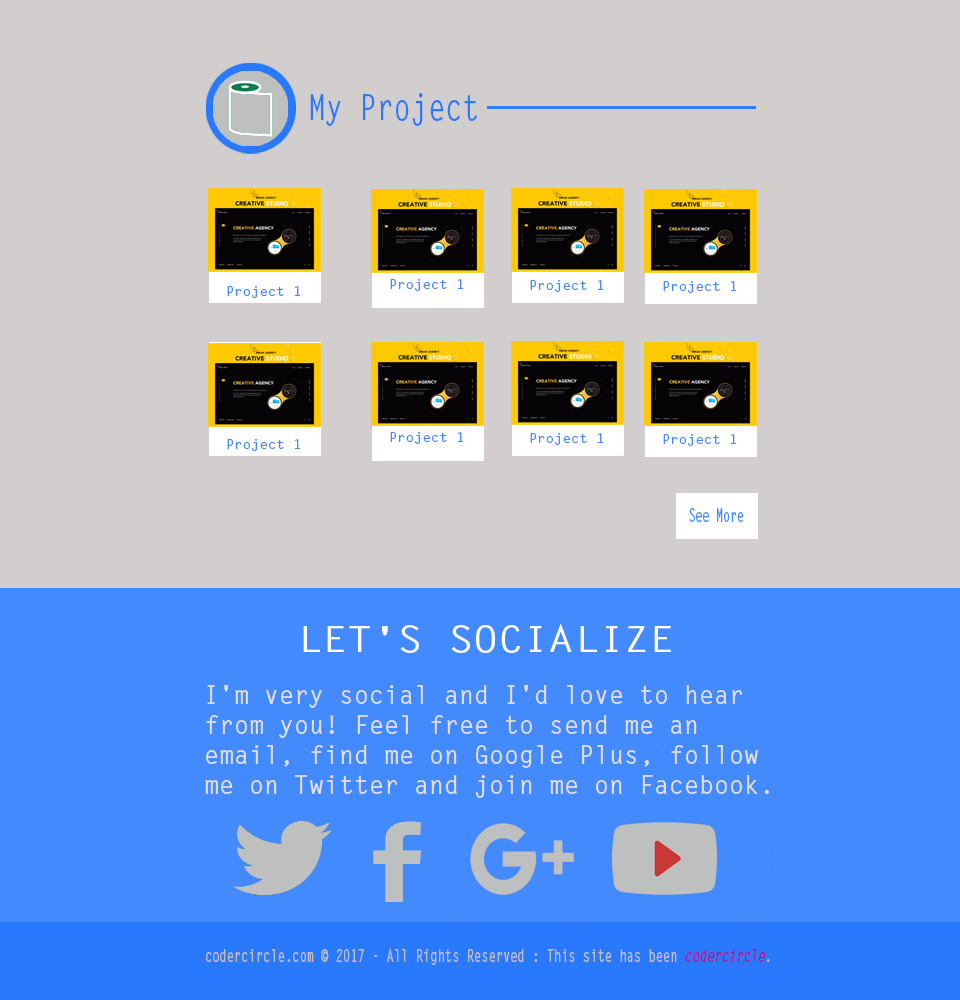
<style>
.page{position:relative;width:960px;height:1000px;background:#d1cecd}
.page>*{position:absolute;margin:0}
.t1{font:35.4px "LetterGothicStd-Bold";color:#2979ff;scale:0.8 1}
.t2{font:12.6px "LetterGothicStd-Bold";color:#448aff;scale:1.12 1}
.t3{font:18.5px "LetterGothicStd-Bold";color:#448aff;scale:0.63 1}
.t4{font:36.8px "LetterGothicStd-Bold";color:#ffffff;scale:1.14 1}
.t5{font:25px "LetterGothicStd-Bold";color:#e3dfdf}
.t6{font:17.8px "LetterGothicStd-Bold";color:#bebfbf;scale:0.68 1}
.t7{font:17.8px "LetterGothicStd-BoldSlanted";color:#c1058a;scale:0.68 1}
</style>
<div class="page">
<p class="t1" style="left:310px;top:93px;width:168px;height:33px">My Project</p>
<p class="t2" style="left:390px;top:279px;width:73px;height:12px">Project 1</p>
<p class="t2" style="left:530px;top:280px;width:73px;height:12px">Project 1</p>
<p class="t2" style="left:663px;top:281px;width:73px;height:12px">Project 1</p>
<p class="t2" style="left:227px;top:286px;width:73px;height:12px">Project 1</p>
<p class="t2" style="left:390px;top:432px;width:73px;height:12px">Project 1</p>
<p class="t2" style="left:530px;top:433px;width:73px;height:12px">Project 1</p>
<p class="t2" style="left:663px;top:434px;width:73px;height:12px">Project 1</p>
<p class="t2" style="left:227px;top:439px;width:73px;height:12px">Project 1</p>
<p class="t3" style="left:689px;top:508px;width:55px;height:14px">See More</p>
<p class="t4" style="left:303px;top:623px;width:368px;height:30px">LET'S SOCIALIZE</p>
<p class="t5" style="left:205px;top:685px;width:564px;height:113px">I'm very social and I'd love to hear <br>from you! Feel free to send me an <br>email, find me on Google Plus, follow<br>me on Twitter and join me on Facebook.</p>
<p class="t6" style="left:206px;top:948px;width:564px;height:17px">codercircle.com © 2017 - All Rights Reserved : This site has been <span class="t7">codercircle</span>.</p>
</div>
